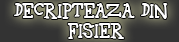
<style>
.page{position:relative;width:179px;height:42px}
.page>*{position:absolute;margin:0}
.t1{font:17px "42";color:#ffffff}
</style>
<div class="page">
<p class="t1" style="left:14px;top:3px;width:154px;height:36px">Decripteaza din <br>        fisier</p>
</div>
